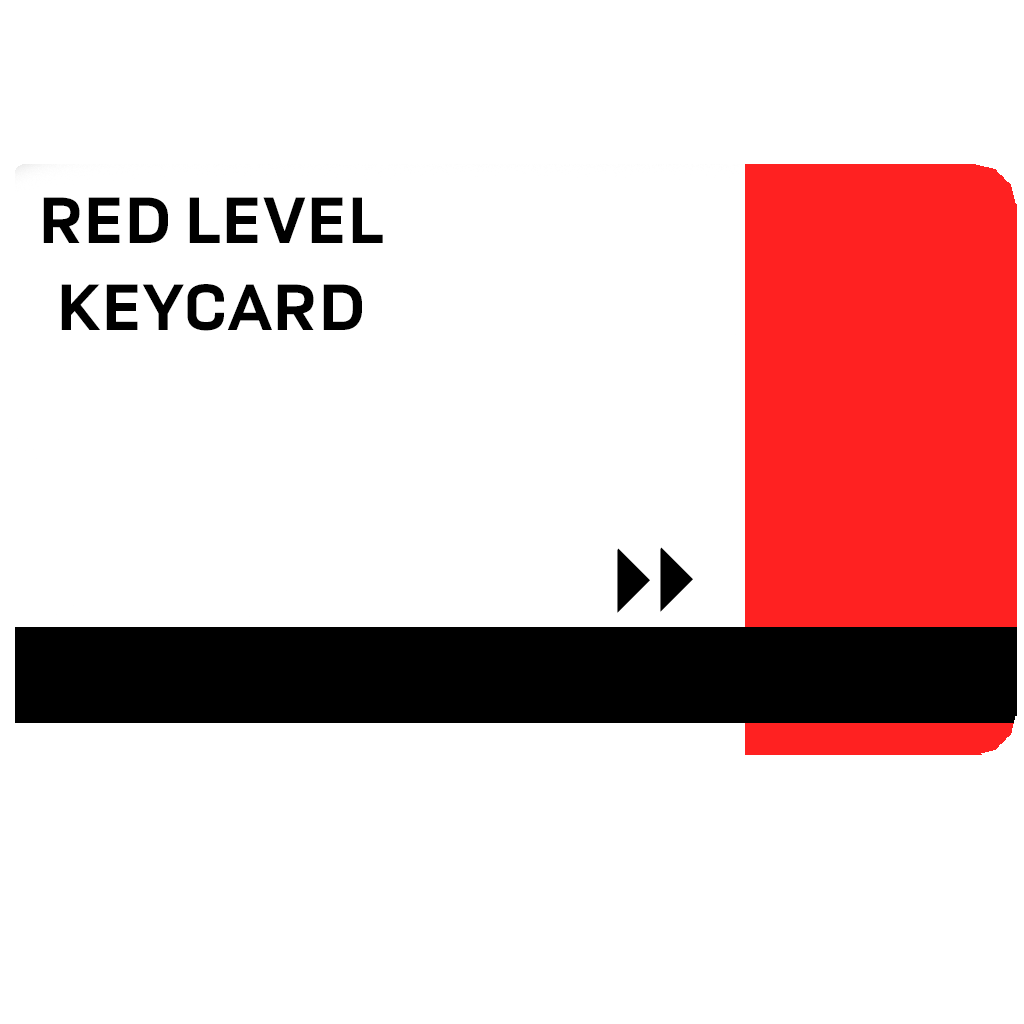
<style>
.page{position:relative;width:1024px;height:1024px;background:#ffffff}
.page>*{position:absolute;margin:0}
.t1{font:73px "USArmyWeb-Bold";color:#000000}
</style>
<div class="page">
<p class="t1" style="left:43px;top:197px;width:340px;height:134px;text-align:center">RED LEVEL<br>KEYCARD</p>
</div>
